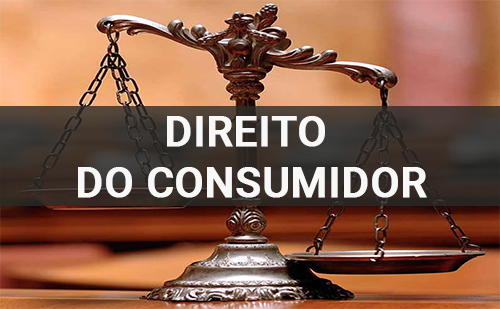
<style>
.page{position:relative;width:500px;height:309px}
.page>*{position:absolute;margin:0}
.t1{font:42px "Roboto-Medium";color:#f8f8f8;font-weight:bold}
</style>
<div class="page">
<p class="t1" style="left:78px;top:116px;width:349px;height:82px;text-align:center">DIREITO <br>DO CONSUMIDOR</p>
</div>
